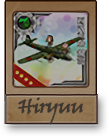
<style>
.page{position:relative;width:109px;height:136px}
.page>*{position:absolute;margin:0}
.t1{font:20px "VinerHandITC";letter-spacing:-0.08em;color:#3e3630;font-weight:bold}
</style>
<div class="page">
<p class="t1" style="left:18px;top:97px;width:66px;height:28px">Hiryuu</p>
</div>
